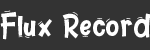
<style>
.page{position:relative;width:150px;height:50px;background:#333333}
.page>*{position:absolute;margin:0}
.t1{font:33.3px "MTD-Summer-Show";color:#ffffff}
</style>
<div class="page">
<p class="t1" style="left:0px;top:10px;width:151px;height:30px">Flux Record</p>
</div>
